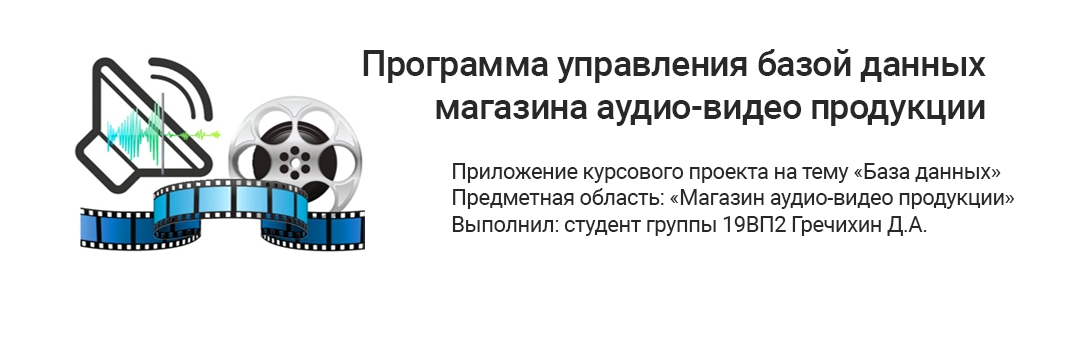
<style>
.page{position:relative;width:1080px;height:340px;background:#ffffff}
.page>*{position:absolute;margin:0}
.t1{font:36px "Roboto-Medium";letter-spacing:-0.025em;color:#282828}
.t2{font:22px "Roboto-Regular";letter-spacing:-0.025em;color:#282828}
</style>
<div class="page">
<p class="t1" style="left:363px;top:49px;width:623px;height:77px;text-align:right">Программа управления базой данных<br>магазина аудио-видео продукции</p>
<p class="t2" style="left:452px;top:163px;width:563px;height:73px">Приложение курсового проекта на тему «База данных»<br>Предметная область: «Магазин аудио-видео продукции»<br>Выполнил: студент группы 19ВП2 Гречихин Д.А.</p>
</div>
